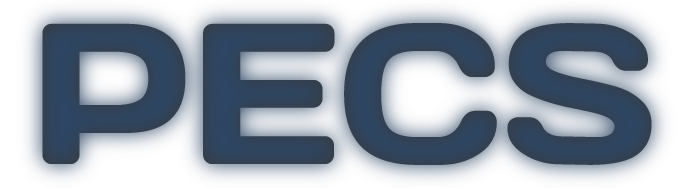
<style>
.page{position:relative;width:700px;height:188px}
.page>*{position:absolute;margin:0}
.t1{font:200px "DaysOne-Regular";color:#30435b}
</style>
<div class="page">
<p class="t1" style="left:42px;top:23px;width:610px;height:142px">PECS</p>
</div>
